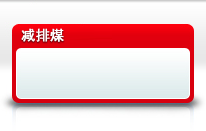
<style>
.page{position:relative;width:206px;height:131px}
.page>*{position:absolute;margin:0}
.t1{font:14px "SimHei";color:#ffffff;font-weight:bold}
</style>
<div class="page">
<p class="t1" style="left:21px;top:28px;width:43px;height:14px">减排煤</p>
</div>
